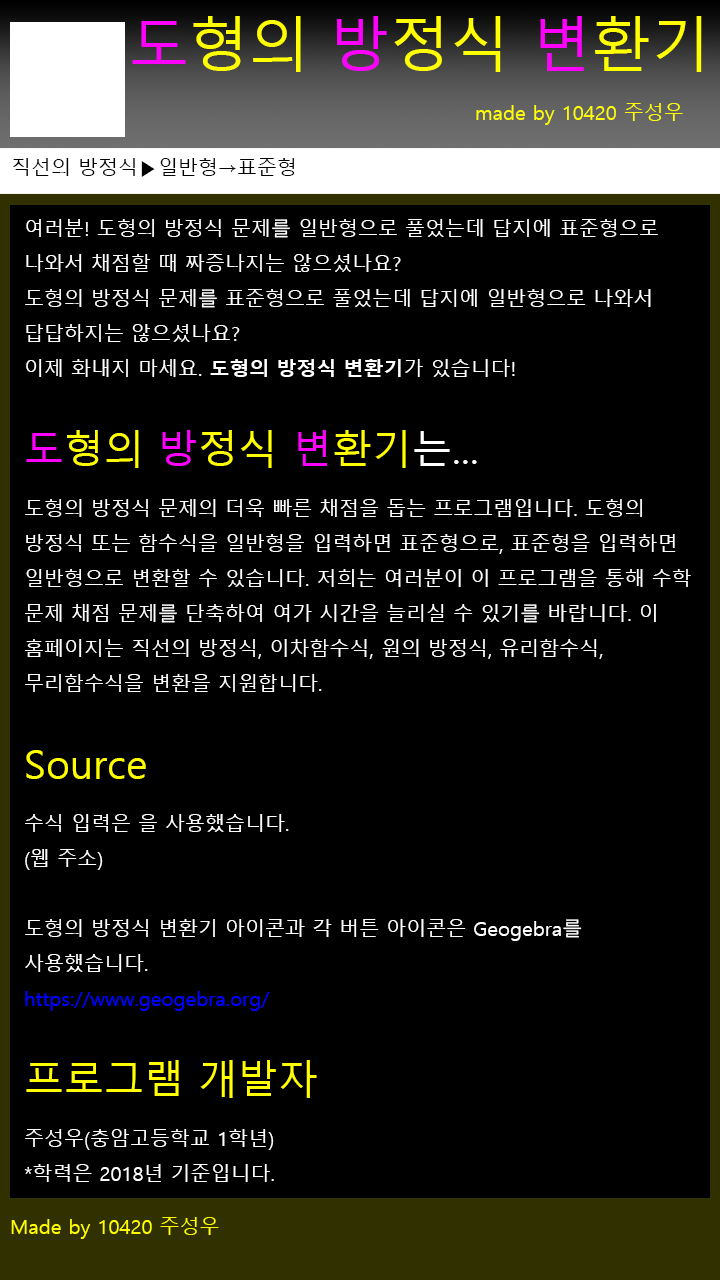
<style>
.page{position:relative;width:720px;height:1280px;background:#000000}
.page>*{position:absolute;margin:0}
.t1{font:60px "MalgunGothic";color:#ffff00}
.t2{font:60px "MalgunGothic";color:#ff00ff}
.t3{font:20px "MalgunGothic";color:#ffff00}
.t4{font:20px "MalgunGothic";color:#000000}
.t5{font:20px "MalgunGothic";color:#ffffff}
.t6{font:20px "MalgunGothicBold";color:#ffffff}
.t7{font:40px "MalgunGothic";color:#ff00ff}
.t8{font:40px "MalgunGothic";color:#ffff00}
.t9{font:40px "MalgunGothic";color:#ffffff}
.t10{font:20px "MalgunGothic";color:#0000ff}
</style>
<div class="page">
<p class="t1" style="left:132px;top:16px;width:570px;height:56px"><span class="t2">도</span>형의 <span class="t2">방</span>정식 <span class="t2">변</span>환기</p>
<p class="t3" style="left:476px;top:103px;width:207px;height:22px">made by 10420 주성우</p>
<p class="t4" style="left:13px;top:158px;width:282px;height:19px">직선의 방정식▶일반형→표준형</p>
<p class="t5" style="left:24px;top:219px;width:667px;height:963px">여러분! 도형의 방정식 문제를 일반형으로 풀었는데 답지에 표준형으로 나와서 채점할 때 짜증나지는 않으셨나요?<br>도형의 방정식 문제를 표준형으로 풀었는데 답지에 일반형으로 나와서 답답하지는 않으셨나요?<br>이제 화내지 마세요. <span class="t6">도형의 방정식 변환기</span>가 있습니다!<br><br><span class="t7">도</span><span class="t8">형의 </span><span class="t7">방</span><span class="t8">정식 </span><span class="t7">변</span><span class="t8">환기</span><span class="t9">는...<br></span>도형의 방정식 문제의 더욱 빠른 채점을 돕는 프로그램입니다. 도형의 방정식 또는 함수식을 일반형을 입력하면 표준형으로, 표준형을 입력하면 일반형으로 변환할 수 있습니다. 저희는 여러분이 이 프로그램을 통해 수학 문제 채점 문제를 단축하여 여가 시간을 늘리실 수 있기를 바랍니다. 이 홈페이지는 직선의 방정식, 이차함수식, 원의 방정식, 유리함수식, 무리함수식을 변환을 지원합니다.<br><br><span class="t8">Source<br></span>수식 입력은 을 사용했습니다.<br>(웹 주소)<br><br>도형의 방정식 변환기 아이콘과 각 버튼 아이콘은 Geogebra를 사용했습니다.<br><span class="t10">https://www.geogebra.org/<br><br></span><span class="t8">프로그램 개발자<br></span>주성우(충암고등학교 1학년)<br>*학력은 2018년 기준입니다.</p>
<p class="t3" style="left:11px;top:1217px;width:208px;height:22px">Made by 10420 주성우</p>
</div>
